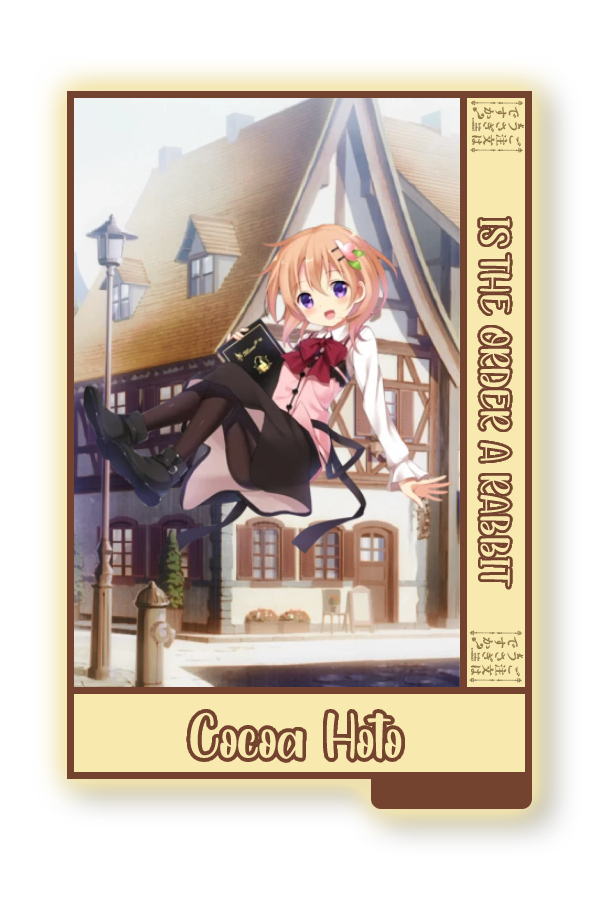
<style>
.page{position:relative;width:600px;height:900px;background:#ffffff}
.page>*{position:absolute;margin:0}
.t1{font:48.8px "YellowRabbit-PersonalUse";color:#f8e9ae}
.t2{font:75px "YellowRabbit-PersonalUse";color:#f8e9ae}
</style>
<div class="page">
<p class="t1" style="left:479px;top:218px;width:32px;height:369px;rotate:90deg">IS THE ORDER A RABBIT</p>
<p class="t2" style="left:186px;top:712px;width:216px;height:48px">Cocoa Hoto</p>
</div>
